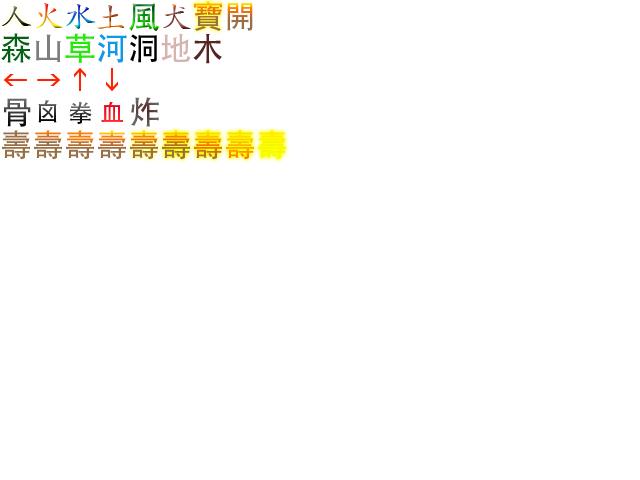
<style>
.page{position:relative;width:640px;height:480px;background:#ffffff}
.page>*{position:absolute;margin:0}
.t1{font:32px "SIL-Kai-Reg-Jian"}
.t2{font:32px "AdobeHeitiStd-Regular"}
.t3{font:32px "AdobeHeitiStd-Regular";color:#036014}
.t4{font:32px "AdobeHeitiStd-Regular";color:#7e7e7e}
.t5{font:32px "AdobeHeitiStd-Regular";color:#29e610}
.t6{font:32px "AdobeHeitiStd-Regular";color:#1098e6}
.t7{font:32px "AdobeHeitiStd-Regular";color:#000000}
.t8{font:32px "AdobeHeitiStd-Regular";color:#d5b3ae}
.t9{font:32px "AdobeHeitiStd-Regular";color:#552521}
.t10{font:24px "AdobeHeitiStd-Regular"}
.t11{font:24px "AdobeHeitiStd-Regular";color:#f41a24}
.t12{font:32px "AdobeHeitiStd-Regular";color:#986e45}
.t13{font:32px "AdobeHeitiStd-Regular";color:#f7f500}
</style>
<div class="page">
<p class="t1" style="left:2px;top:6px;width:30px;height:20px">人</p>
<p class="t1" style="left:35px;top:3px;width:28px;height:25px">火</p>
<p class="t1" style="left:66px;top:4px;width:30px;height:25px">水</p>
<p class="t1" style="left:97px;top:5px;width:27px;height:24px">土</p>
<p class="t2" style="left:129px;top:3px;width:30px;height:28px">風</p>
<p class="t1" style="left:163px;top:4px;width:28px;height:25px">犬</p>
<p class="t2" style="left:194px;top:1px;width:28px;height:30px">寶</p>
<p class="t2" style="left:227px;top:2px;width:26px;height:29px">開</p>
<p class="t3" style="left:1px;top:33px;width:30px;height:30px">森</p>
<p class="t4" style="left:36px;top:34px;width:25px;height:28px">山</p>
<p class="t5" style="left:65px;top:33px;width:30px;height:30px">草</p>
<p class="t6" style="left:98px;top:34px;width:29px;height:29px">河</p>
<p class="t7" style="left:130px;top:34px;width:27px;height:29px">洞</p>
<p class="t8" style="left:161px;top:33px;width:30px;height:29px">地</p>
<p class="t9" style="left:193px;top:33px;width:29px;height:31px">木</p>
<p class="t2" style="left:4px;top:98px;width:27px;height:29px">骨</p>
<p class="t10" style="left:38px;top:100px;width:19px;height:23px">囟</p>
<p class="t10" style="left:69px;top:101px;width:23px;height:23px">拳</p>
<p class="t11" style="left:101px;top:101px;width:22px;height:21px">血</p>
<p class="t2" style="left:131px;top:97px;width:28px;height:30px">炸</p>
<p class="t12" style="left:2px;top:130px;width:28px;height:30px">壽</p>
<p class="t2" style="left:34px;top:130px;width:28px;height:30px">壽</p>
<p class="t2" style="left:66px;top:130px;width:28px;height:30px">壽</p>
<p class="t2" style="left:98px;top:130px;width:28px;height:30px">壽</p>
<p class="t2" style="left:130px;top:130px;width:28px;height:30px">壽</p>
<p class="t2" style="left:162px;top:130px;width:28px;height:30px">壽</p>
<p class="t2" style="left:194px;top:130px;width:28px;height:30px">壽</p>
<p class="t2" style="left:226px;top:130px;width:28px;height:30px">壽</p>
<p class="t13" style="left:258px;top:130px;width:28px;height:30px">壽</p>
</div>
